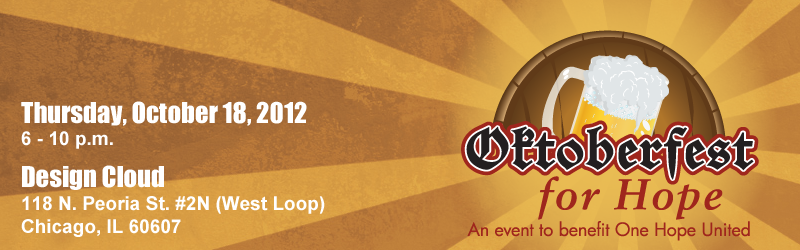
<style>
.page{position:relative;width:800px;height:250px}
.page>*{position:absolute;margin:0}
.t1{font:19px "Arial-BoldMT";color:#ffffff}
.t2{font:26.6px "Impact";color:#ffffff}
</style>
<div class="page">
<p class="t1" style="left:21px;top:101px;width:304px;height:136px"><span class="t2">Thursday, October 18, 2012<br></span>6 - 10 p.m.<br><span class="t2">Design Cloud<br></span>118 N. Peoria St. #2N (West Loop)<br>Chicago, IL 60607</p>
</div>
